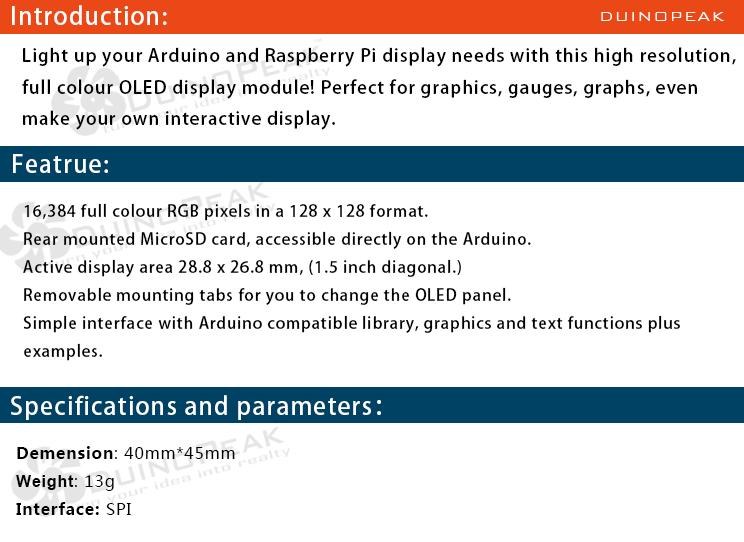
<style>
.page{position:relative;width:744px;height:542px;background:#ffffff}
.page>*{position:absolute;margin:0}
.t1{font:24px "AdobeHeitiStd-Regular";letter-spacing:0.05em;color:#ffffff}
.t2{font:18px "BankGothicBT-Light";letter-spacing:0.05em;color:#ffffff}
.t3{font:18px "AdobeHeitiStd-Regular";letter-spacing:0.05em;color:#000000}
.t4{font:16px "AdobeHeitiStd-Regular";letter-spacing:0.05em;color:#000000}
.t5{font:16px "MicrosoftYaHei";letter-spacing:0.05em;color:#000000}
.t6{font:16px "MicrosoftYaHei-Bold";letter-spacing:0.05em;color:#000000}
.t7{font:16px "Arial-BoldMT";letter-spacing:0.05em;color:#000000}
</style>
<div class="page">
<p class="t1" style="left:12px;top:5px;width:155px;height:20px">Introduction:</p>
<p class="t2" style="left:601px;top:12px;width:124px;height:9px">DUINOPEAK</p>
<p class="t3" style="left:22px;top:47px;width:714px;height:83px">Light up your Arduino and Raspberry Pi display needs with this high resolution, <br>full colour OLED display module! Perfect for graphics, gauges, graphs, even <br>make your own interactive display.</p>
<p class="t1" style="left:13px;top:154px;width:95px;height:19px">Featrue:</p>
<p class="t4" style="left:23px;top:203px;width:657px;height:158px">16,384 full colour RGB pixels in a 128 x 128 format.<br>Rear mounted MicroSD card, accessible directly on the Arduino.<br>Active display area 28.8 x 26.8 mm, (1.5 inch diagonal.)<br>Removable mounting tabs for you to change the OLED panel.<br>Simple interface with Arduino compatible library, graphics and text functions plus<br>examples.</p>
<p class="t1" style="left:11px;top:395px;width:370px;height:25px">Specifications and parameters：</p>
<p class="t5" style="left:16px;top:446px;width:219px;height:69px"><span class="t6">Demension</span>: 40mm*45mm<br><span class="t7">Weight</span>: 13g<br><span class="t6">Interface: </span>SPI</p>
</div>
